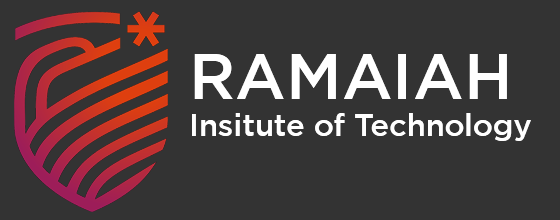
<style>
.page{position:relative;width:560px;height:220px;background:#333333}
.page>*{position:absolute;margin:0}
.t1{font:30.6px "Gotham-Medium";color:#ffffff}
.t2{font:64.2px "Gotham-Medium";color:#ffffff}
</style>
<div class="page">
<p class="t1" style="left:192px;top:54px;width:339px;height:87px"><span class="t2">RAMAIAH<br></span>Insitute of Technology</p>
</div>
